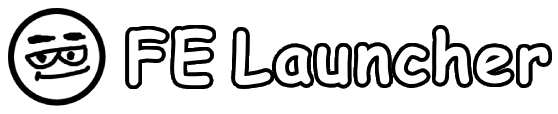
<style>
.page{position:relative;width:558px;height:114px;background:#ffffff}
.page>*{position:absolute;margin:0}
.t1{font:68.2px "ComicSansMS-Bold";letter-spacing:0.052em;color:#ffffff}
</style>
<div class="page">
<p class="t1" style="left:129px;top:28px;width:420px;height:58px">FE Launcher</p>
</div>
